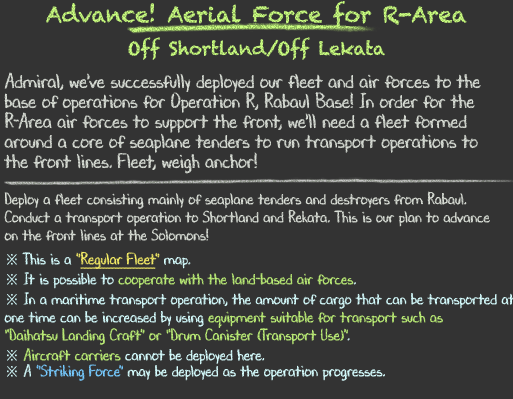
<style>
.page{position:relative;width:513px;height:399px;background:#333333}
.page>*{position:absolute;margin:0}
.t1{font:22px/36px "Chalkduster"}
.t2{font:18px/36px "Chalkduster"}
.t3{font:20px/20px "DJBChalkItUp";color:#d9ded6;scale:0.9 1}
.t4{font:16px/18px "DJBChalkItUp";color:#d9ded6;scale:0.9 1}
.t5{font:16px/24px "DJBChalkItUp";color:#d9ded6;scale:0.9 1}
.t6{font:16px/20px "TimesNewRomanPSMT";color:#d7feff;scale:0.9 1}
.t7{font:16px/20px "DJBChalkItUp";color:#d7feff;scale:0.9 1}
.t8{font:16px/20px "DJBChalkItUp";color:#f5ed68;scale:0.9 1}
.t9{font:16px/20px "DJBChalkItUp";color:#f5ed68;text-decoration:underline;scale:0.9 1}
.t10{font:16px/20px "DJBChalkItUp";color:#bdef78;scale:0.9 1}
.t11{font:16px/18px "TimesNewRomanPSMT";color:#d7feff;scale:0.9 1}
.t12{font:16px/18px "DJBChalkItUp";color:#d7feff;scale:0.9 1}
.t13{font:16px/18px "DJBChalkItUp";color:#bdef78;scale:0.9 1}
.t14{font:16px/16px "TimesNewRomanPSMT";color:#d7feff;scale:0.9 1}
.t15{font:16px/16px "DJBChalkItUp";color:#bdef78;scale:0.9 1}
.t16{font:16px/16px "DJBChalkItUp";color:#d7feff;scale:0.9 1}
.t17{font:16px/16px "DJBChalkItUp";color:#77cbff;scale:0.9 1}
</style>
<div class="page">
<p class="t1" style="left:46px;top:1px;width:421px;height:59px;text-align:center">Advance! Aerial Force for R-Area<br><span class="t2">Off Shortland/Off Lekata</span></p>
<p class="t3" style="left:4px;top:72px;width:511px;height:309px">Admiral, we've successfully deployed our fleet and air forces to the<br>base of operations for Operation R, Rabaul Base! In order for the<br>R-Area air forces to support the front, we'll need a fleet formed<br>around a core of seaplane tenders to run transport operations to<br>the front lines. Fleet, weigh anchor!<br><br><span class="t4">Deploy a fleet consisting mainly of seaplane tenders and destroyers from Rabaul.<br>Conduct a transport operation to Shortland and Rekata. This is our plan to advance<br></span><span class="t5">on the front lines at the Solomons!<br></span><span class="t6">※ </span><span class="t7">This is a </span><span class="t8">"</span><span class="t9">Regular Fleet</span><span class="t8">"</span><span class="t7"> map.<br></span><span class="t6">※</span><span class="t7"> It is possible to </span><span class="t10">cooperate with the land-based air forces</span><span class="t7">.<br></span><span class="t11">※</span><span class="t12"> In a maritime transport operation, the amount of cargo that can be transported at<br>one time can be increased by using </span><span class="t13">equipment suitable for transport such as<br></span><span class="t10">“Daihatsu Landing Craft” or “Drum Canister (Transport Use)”</span><span class="t7">.<br></span><span class="t14">※ </span><span class="t15">Aircraft carriers</span><span class="t16"> cannot be deployed here.<br></span><span class="t14">※</span><span class="t16"> A </span><span class="t17">"Striking Force"</span><span class="t16"> may be deployed as the operation progresses.</span></p>
</div>
